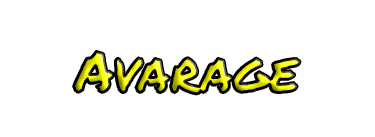
<style>
.page{position:relative;width:375px;height:137px;background:#ffffff}
.page>*{position:absolute;margin:0}
.t1{font:56px "PermanentMarker-Regular"}
</style>
<div class="page">
<p class="t1" style="left:73px;top:51px;width:227px;height:43px">Avarage</p>
</div>
